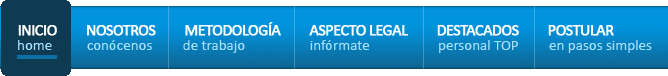
<style>
.page{position:relative;width:668px;height:76px}
.page>*{position:absolute;margin:0}
.t1{font:15.9px "Calibri";letter-spacing:-0.05em;color:#ffffff;font-weight:bold}
.t2{font:15px "Calibri";color:#a7e1ff}
</style>
<div class="page">
<p class="t1" style="left:18px;top:22px;width:596px;height:14px">INICIO         NOSOTROS         METODOLOGÍA         ASPECTO LEGAL         DESTACADOS         POSTULAR</p>
<p class="t2" style="left:18px;top:40px;width:634px;height:13px">home           conócenos         de trabajo             infórmate                   personal TOP         en pasos simples</p>
</div>
